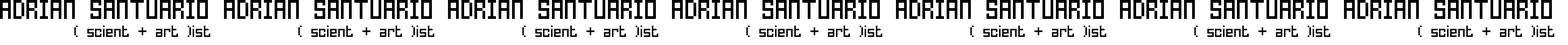
<style>
.page{position:relative;width:1568px;height:45px;background:#ffffff}
.page>*{position:absolute;margin:0}
.t1{font:26.9px "HomespunTTBRK";letter-spacing:-0.005em;color:#000000}
.t2{font:16.1px "HomespunTTBRK";letter-spacing:-0.005em;color:#000000}
</style>
<div class="page">
<p class="t1" style="left:0px;top:0px;width:208px;height:19px">ADRIAN SANTUARIO</p>
<p class="t1" style="left:224px;top:0px;width:208px;height:19px">ADRIAN SANTUARIO</p>
<p class="t1" style="left:448px;top:0px;width:208px;height:19px">ADRIAN SANTUARIO</p>
<p class="t1" style="left:672px;top:0px;width:208px;height:19px">ADRIAN SANTUARIO</p>
<p class="t1" style="left:896px;top:0px;width:208px;height:19px">ADRIAN SANTUARIO</p>
<p class="t1" style="left:1120px;top:0px;width:208px;height:19px">ADRIAN SANTUARIO</p>
<p class="t1" style="left:1344px;top:0px;width:208px;height:19px">ADRIAN SANTUARIO</p>
<p class="t2" style="left:74px;top:25px;width:137px;height:12px">( scient + art )ist</p>
<p class="t2" style="left:298px;top:25px;width:137px;height:12px">( scient + art )ist</p>
<p class="t2" style="left:522px;top:25px;width:137px;height:12px">( scient + art )ist</p>
<p class="t2" style="left:746px;top:25px;width:137px;height:12px">( scient + art )ist</p>
<p class="t2" style="left:970px;top:25px;width:137px;height:12px">( scient + art )ist</p>
<p class="t2" style="left:1194px;top:25px;width:137px;height:12px">( scient + art )ist</p>
<p class="t2" style="left:1418px;top:25px;width:137px;height:12px">( scient + art )ist</p>
</div>
